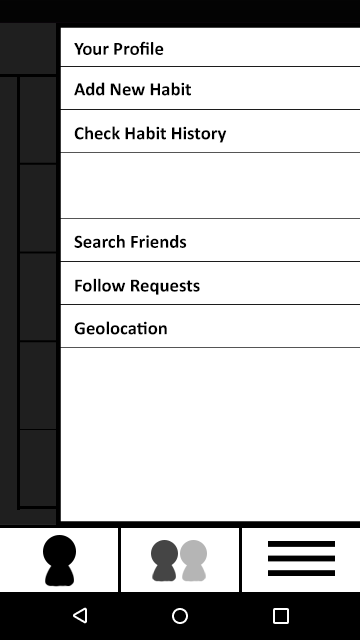
<style>
.page{position:relative;width:360px;height:640px;background:#ffffff}
.page>*{position:absolute;margin:0}
.t1{font:18.7px "Calibri-Bold";color:#000000}
.t2{font:18.6px "Calibri-Bold";color:#000000}
</style>
<div class="page">
<p class="t1" style="left:74px;top:41px;width:90px;height:14px">Your Profile</p>
<p class="t1" style="left:74px;top:82px;width:117px;height:14px">Add New Habit</p>
<p class="t1" style="left:74px;top:126px;width:153px;height:17px">Check Habit History</p>
<p class="t2" style="left:74px;top:235px;width:113px;height:13px">Search Friends</p>
<p class="t2" style="left:75px;top:278px;width:125px;height:17px">Follow Requests</p>
<p class="t2" style="left:74px;top:321px;width:93px;height:14px">Geolocation</p>
</div>
